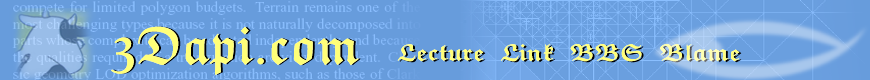
<style>
.page{position:relative;width:870px;height:80px;background:#679cdc}
.page>*{position:absolute;margin:0}
.t1{font:53.5px "TeXplusEF-Bold";color:#ffff78;scale:0.86 1}
.t2{font:53.5px "TeXplusEF-Bold";scale:0.86 1}
.t3{font:24px "TeXplusEF-Bold";color:#ffff78}
.t4{font:24px "TeXplusEF-Bold"}
</style>
<div class="page">
<p class="t1" style="left:111px;top:26px;width:248px;height:49px">3Dapi.com</p>
<p class="t1" style="left:111px;top:26px;width:248px;height:49px">3Dapi.com</p>
<p class="t2" style="left:113px;top:26px;width:248px;height:49px">3Dapi.com</p>
<p class="t3" style="left:397px;top:44px;width:343px;height:18px">Lecture  Link  BBS  Blame</p>
<p class="t3" style="left:397px;top:44px;width:343px;height:18px">Lecture  Link  BBS  Blame</p>
<p class="t4" style="left:399px;top:45px;width:343px;height:18px">Lecture  Link  BBS  Blame</p>
</div>
